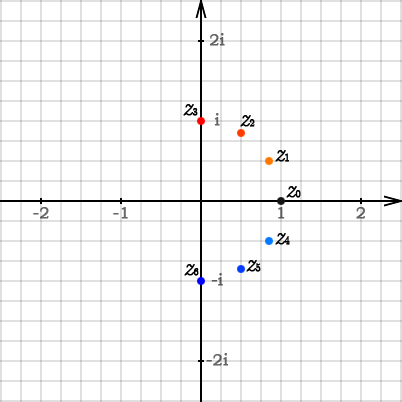
<style>
.page{position:relative;width:402px;height:402px;background:#ffffff}
.page>*{position:absolute;margin:0}
.t1{font:16px "BookmanOldStyle";color:#666666;font-weight:bold}
.t2{font:24px "CMUSerif-Italic";color:#000000;font-weight:bold}
.t3{font:10px "CMUSerif-Roman";color:#000000;font-weight:bold}
.t4{font:16px "BookmanOldStyle";color:#5a5a5a;font-weight:bold}
</style>
<div class="page">
<p class="t1" style="left:209px;top:33px;width:16px;height:13px">2i</p>
<p class="t2" style="left:183px;top:104px;width:15px;height:12px">z<span class="t3">3</span></p>
<p class="t1" style="left:214px;top:113px;width:6px;height:13px">i</p>
<p class="t2" style="left:240px;top:115px;width:15px;height:12px">z<span class="t3">2</span></p>
<p class="t2" style="left:275px;top:150px;width:14px;height:12px">z<span class="t3">1</span></p>
<p class="t2" style="left:286px;top:186px;width:15px;height:12px">z<span class="t3">0</span></p>
<p class="t1" style="left:33px;top:207px;width:16px;height:12px">-2</p>
<p class="t1" style="left:113px;top:207px;width:15px;height:12px">-1</p>
<p class="t4" style="left:278px;top:207px;width:7px;height:12px">1</p>
<p class="t1" style="left:356px;top:207px;width:9px;height:12px">2</p>
<p class="t2" style="left:275px;top:233px;width:15px;height:12px">z<span class="t3">4</span></p>
<p class="t2" style="left:184px;top:264px;width:15px;height:12px">z<span class="t3">6</span></p>
<p class="t2" style="left:246px;top:260px;width:15px;height:12px">z<span class="t3">5</span></p>
<p class="t4" style="left:211px;top:273px;width:12px;height:13px">-i</p>
<p class="t1" style="left:206px;top:353px;width:23px;height:13px">-2i</p>
</div>
